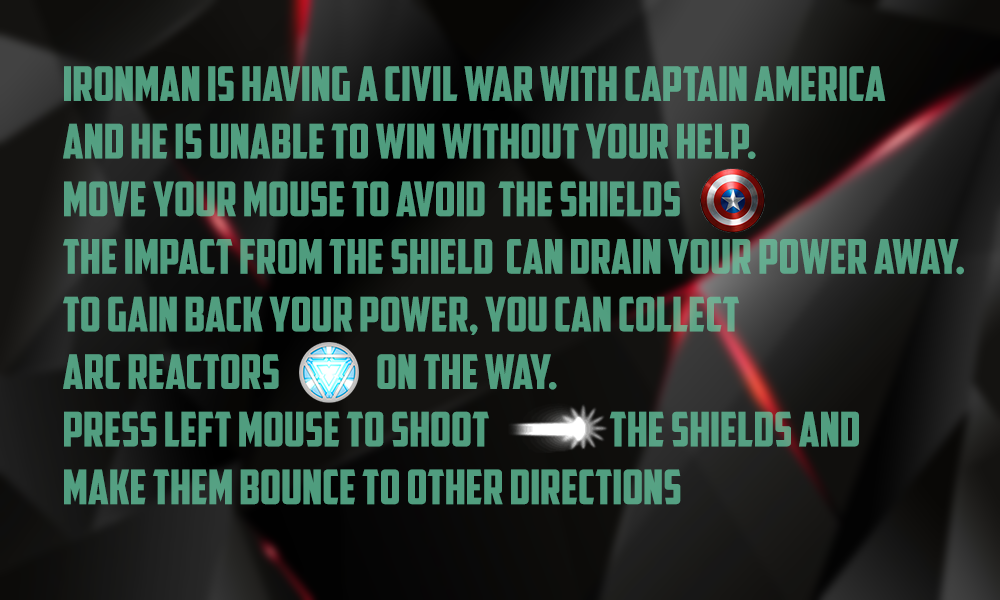
<style>
.page{position:relative;width:1000px;height:600px}
.page>*{position:absolute;margin:0}
.t1{font:48px "AmericanCaptain";color:#529e80}
</style>
<div class="page">
<p class="t1" style="left:63px;top:66px;width:901px;height:439px">Ironman is having a civil war with captain america <br>and he is unable to win without your help.<br>Move Your mouse to avoid  the shields<br>The impact from the shield  can drain your power away.<br>to gain back your power, you can collect <br>arc reactors                on the way.<br>press left mouse to shoot                    the shields and <br>make them bounce to other directions</p>
</div>
